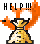
<style>
.page{position:relative;width:40px;height:44px;background:#ffffff}
.page>*{position:absolute;margin:0}
.t1{font:9px "MyriadPro-BoldCond";color:#000000}
</style>
<div class="page">
<p class="t1" style="left:4px;top:3px;width:27px;height:7px">H E L P !!!</p>
</div>
